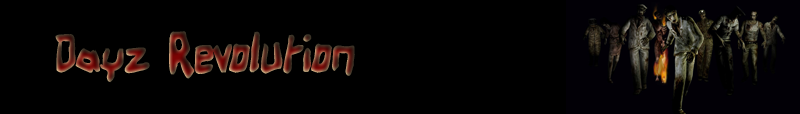
<style>
.page{position:relative;width:800px;height:114px;background:#000000}
.page>*{position:absolute;margin:0}
.t1{font:48px "BirdlandAeroplane-Bold"}
</style>
<div class="page">
<p class="t1" style="left:55px;top:31px;width:300px;height:52px">Dayz Revolution</p>
</div>
